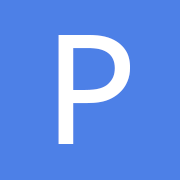
<style>
.page{position:relative;width:180px;height:180px;background:#4d80e7}
.page>*{position:absolute;margin:0}
.t1{font:150px "Verdana";color:#ffffff}
</style>
<div class="page">
<p class="t1" style="left:58px;top:35px;width:72px;height:109px">P</p>
</div>
